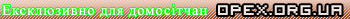
<style>
.page{position:relative;width:350px;height:19px}
.page>*{position:absolute;margin:0}
.t1{font:15px "TimesNewRomanPSMT";letter-spacing:0.05em;color:#ffffff}
.t2{font:25px "VisitorTT2BRK";letter-spacing:0.05em;color:#f3e4dc}
</style>
<div class="page">
<p class="t1" style="left:2px;top:4px;width:206px;height:13px">Ексклюзивно для домосітчан</p>
<p class="t2" style="left:218px;top:5px;width:124px;height:10px">OPEX.ORG.UA</p>
</div>
